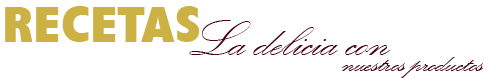
<style>
.page{position:relative;width:496px;height:84px;background:#ffffff}
.page>*{position:absolute;margin:0}
.t1{font:51.3px "Humanist521BT-XtraBoldCondensed";color:#ccb245;scale:1.05 1}
.t2{font:52.2px "KunstlerScript";color:#460010;scale:1.05 1}
.t3{font:31.3px "KunstlerScript";color:#460010;scale:1.05 1}
</style>
<div class="page">
<p class="t1" style="left:5px;top:6px;width:195px;height:36px">RECETAS</p>
<p class="t2" style="left:189px;top:20px;width:201px;height:35px">La delicia con</p>
<p class="t3" style="left:342px;top:57px;width:141px;height:21px">nuestros productos</p>
</div>
